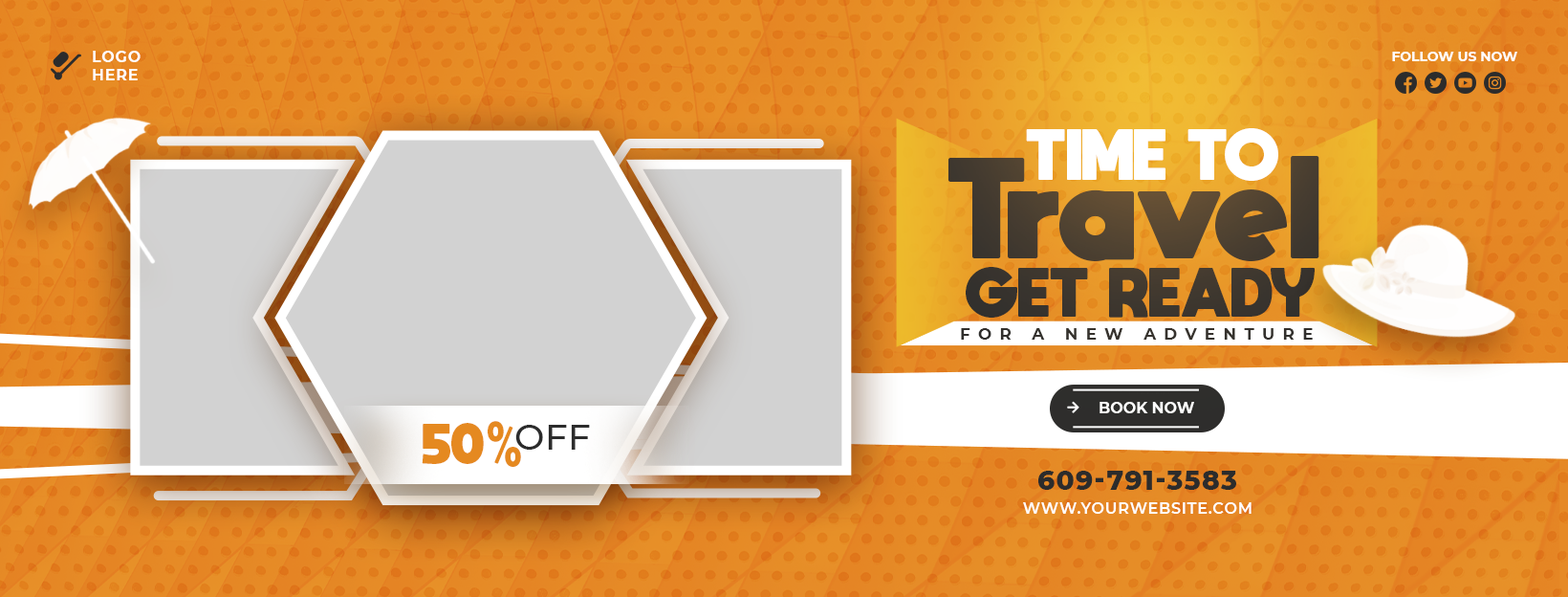
<style>
.page{position:relative;width:1568px;height:597px}
.page>*{position:absolute;margin:0}
.t1{font:15.3px "Montserrat-Bold";letter-spacing:0.05em;color:#ffffff;text-transform:uppercase}
.t2{font:13.4px "Montserrat-Bold";color:#ffffff;text-transform:uppercase}
.t3{font:50.3px "moon_get-Heavy";color:#ffffff;text-transform:uppercase}
.t4{font:100.2px "moon_get-Heavy";color:#4d4131}
.t5{font:48.6px "moon_get-Heavy";color:#2c2c2c;text-transform:uppercase}
.t6{font:16px "Montserrat-Bold";letter-spacing:0.5em;color:#2c2c2c;text-transform:uppercase}
.t7{font:15.3px "Montserrat-Bold";color:#ffffff;text-transform:uppercase}
.t8{font:39.2px "moon_get-Heavy";color:#e58920;text-transform:uppercase}
.t9{font:35.7px "Montserrat-Medium";color:#2c2c2c;text-transform:uppercase}
.t10{font:26.8px "Montserrat-ExtraBold";letter-spacing:0.05em;color:#2c2c2c;text-transform:uppercase}
.t11{font:15.3px "Montserrat-SemiBold";letter-spacing:0.05em;color:#ffffff;text-transform:uppercase}
</style>
<div class="page">
<p class="t1" style="left:93px;top:51px;width:48px;height:29px">Logo<br>Here</p>
<p class="t2" style="left:1392px;top:52px;width:125px;height:9px">Follow Us Now</p>
<p class="t3" style="left:1026px;top:128px;width:252px;height:53px">Time To</p>
<p class="t4" style="left:947px;top:156px;width:372px;height:105px">Travel</p>
<p class="t5" style="left:966px;top:267px;width:349px;height:50px">Get Ready</p>
<p class="t6" style="left:961px;top:328px;width:352px;height:11px">For A New Adventure</p>
<p class="t7" style="left:1100px;top:402px;width:94px;height:11px">Book Now</p>
<p class="t8" style="left:422px;top:421px;width:99px;height:46px">50%</p>
<p class="t9" style="left:515px;top:425px;width:75px;height:24px">Off</p>
<p class="t10" style="left:1038px;top:470px;width:198px;height:20px">609-791-3583</p>
<p class="t11" style="left:1023px;top:502px;width:229px;height:11px">www.yourwebsite.com</p>
</div>
